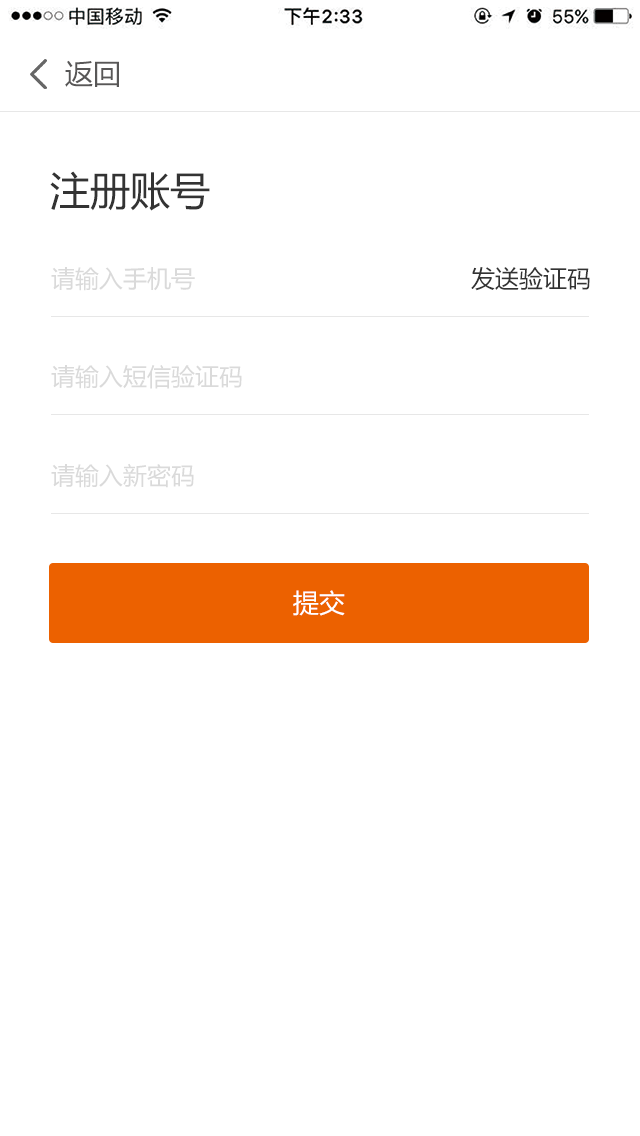
<style>
.page{position:relative;width:640px;height:1136px;background:#ffffff}
.page>*{position:absolute;margin:0}
.t1{font:28px "MicrosoftYaHei";color:#585757}
.t2{font:40px "MicrosoftYaHei";color:#333333}
.t3{font:24px "MicrosoftYaHei";color:#dadada}
.t4{font:24px "MicrosoftYaHei";color:#333333}
.t5{font:26px "MicrosoftYaHei";color:#ffffff}
</style>
<div class="page">
<p class="t1" style="left:65px;top:60px;width:54px;height:27px">返回</p>
<p class="t2" style="left:50px;top:171px;width:160px;height:40px">注册账号</p>
<p class="t3" style="left:51px;top:267px;width:144px;height:24px">请输入手机号</p>
<p class="t4" style="left:471px;top:267px;width:119px;height:24px">发送验证码</p>
<p class="t3" style="left:51px;top:365px;width:191px;height:24px">请输入短信验证码</p>
<p class="t3" style="left:51px;top:463px;width:143px;height:25px">请输入新密码</p>
<p class="t5" style="left:293px;top:590px;width:52px;height:26px">提交</p>
</div>
